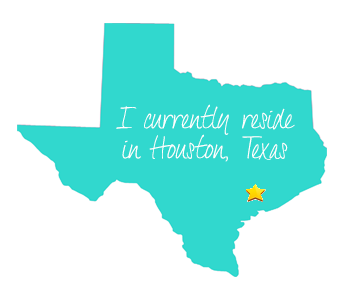
<style>
.page{position:relative;width:341px;height:299px;background:#ffffff}
.page>*{position:absolute;margin:0}
.t1{font:25px "DexteraTrial";color:#ffffff;scale:1.04 1}
</style>
<div class="page">
<p class="t1" style="left:116px;top:104px;width:179px;height:58px;text-align:center">I currently reside<br>in Houston, Texas</p>
</div>
